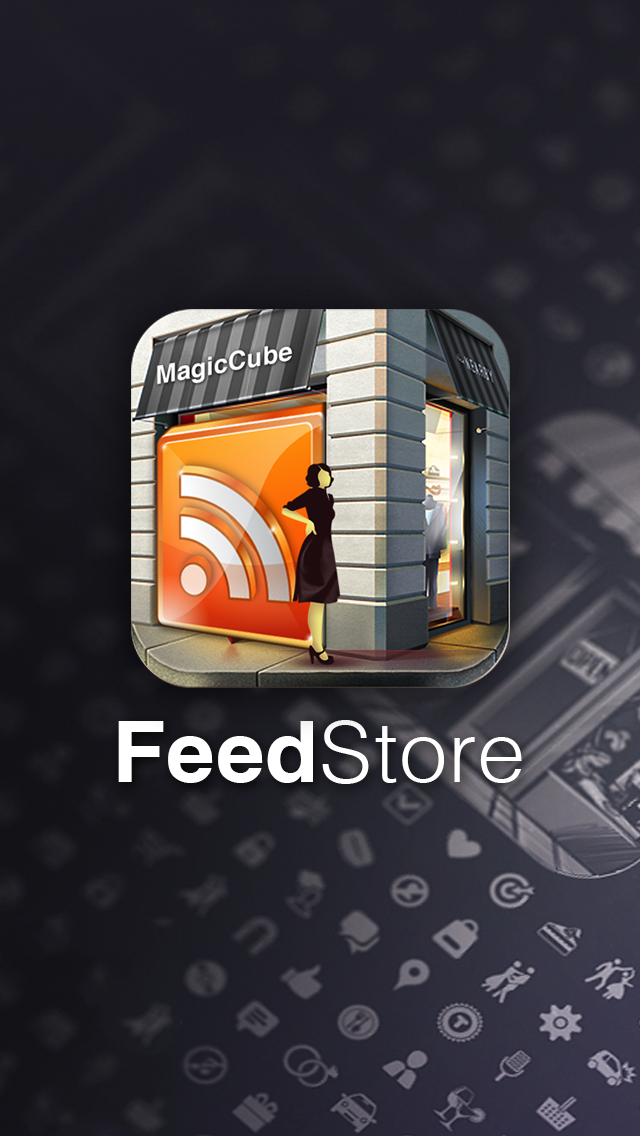
<style>
.page{position:relative;width:640px;height:1136px}
.page>*{position:absolute;margin:0}
.t1{font:84.3px "Helvetica-Light";letter-spacing:0.01em;color:#ffffff;scale:1.04 1}
.t2{font:84.3px "Helvetica-Bold";letter-spacing:0.01em;color:#ffffff;scale:1.04 1}
</style>
<div class="page">
<p class="t1" style="left:118px;top:720px;width:404px;height:64px"><span class="t2">Feed</span>Store</p>
</div>
